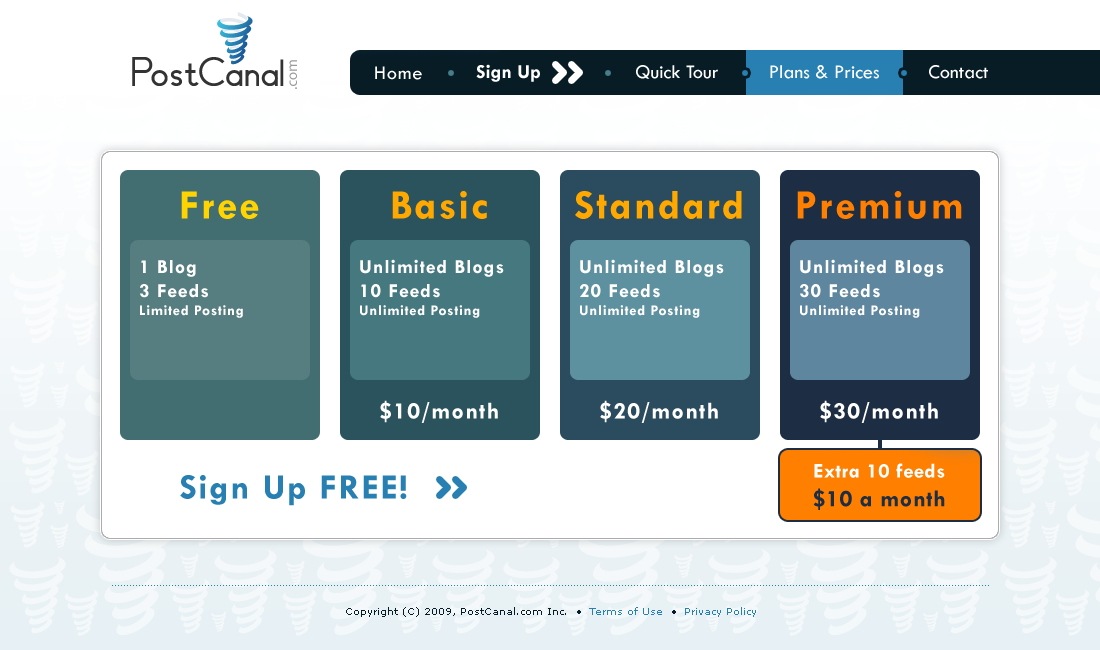
<style>
.page{position:relative;width:1100px;height:650px;background:#ffffff}
.page>*{position:absolute;margin:0}
.t1{font:20px "TwCenMT-Bold";color:#ffffff}
.t2{font:20px "TwCenMT-Regular";color:#ffffff}
.t3{font:20px "TwCenMT-Regular";letter-spacing:0.05em;color:#ffffff}
.t4{font:42px "TwCenMT-Bold";letter-spacing:0.05em;color:#ffd400}
.t5{font:42px "TwCenMT-Bold";letter-spacing:0.05em;color:#ffa800}
.t6{font:42px "TwCenMT-Bold";letter-spacing:0.05em;color:#ff7f00}
.t7{font:15px "TwCenMT-Bold";letter-spacing:0.05em;color:#ffffff}
.t8{font:20px "TwCenMT-Bold";letter-spacing:0.05em;color:#ffffff}
.t9{font:24px "TwCenMT-Bold";letter-spacing:0.05em;color:#ffffff}
.t10{font:21px "TwCenMT-Bold";letter-spacing:0.025em;color:#ffffff}
.t11{font:24px "TwCenMT-Bold";letter-spacing:0.025em;color:#1c2d44}
.t12{font:36px "TwCenMT-Bold";letter-spacing:0.05em;color:#2780b1}
.t13{font:10px "Verdana";color:#081c26}
.t14{font:10px "Verdana";color:#2780b1}
</style>
<div class="page">
<p class="t1" style="left:476px;top:64px;width:64px;height:18px">Sign Up</p>
<p class="t2" style="left:636px;top:65px;width:82px;height:14px">Quick Tour</p>
<p class="t2" style="left:770px;top:65px;width:109px;height:14px">Plans &amp; Prices</p>
<p class="t2" style="left:929px;top:65px;width:59px;height:14px">Contact</p>
<p class="t3" style="left:375px;top:66px;width:47px;height:14px">Home</p>
<p class="t4" style="left:181px;top:191px;width:78px;height:28px">Free</p>
<p class="t5" style="left:392px;top:191px;width:95px;height:28px">Basic</p>
<p class="t5" style="left:575px;top:191px;width:167px;height:28px">Standard</p>
<p class="t6" style="left:797px;top:191px;width:165px;height:28px">Premium</p>
<p class="t7" style="left:140px;top:260px;width:103px;height:58px"><span class="t8">1 Blog<br>3 Feeds<br></span>Limited Posting</p>
<p class="t8" style="left:360px;top:259px;width:144px;height:59px">Unlimited Blogs<br>10 Feeds<br><span class="t7">Unlimited Posting</span></p>
<p class="t8" style="left:580px;top:259px;width:144px;height:59px">Unlimited Blogs<br>20 Feeds<br><span class="t7">Unlimited Posting</span></p>
<p class="t8" style="left:800px;top:259px;width:144px;height:59px">Unlimited Blogs<br>30 Feeds<br><span class="t7">Unlimited Posting</span></p>
<p class="t9" style="left:380px;top:400px;width:118px;height:23px">$10/month</p>
<p class="t9" style="left:600px;top:400px;width:118px;height:23px">$20/month</p>
<p class="t9" style="left:820px;top:400px;width:118px;height:23px">$30/month</p>
<p class="t10" style="left:813px;top:463px;width:132px;height:47px;text-align:center">Extra 10 feeds<br><span class="t11">$10 a month</span></p>
<p class="t12" style="left:180px;top:475px;width:227px;height:31px">Sign Up FREE!</p>
<p class="t13" style="left:346px;top:607px;width:410px;height:10px">Copyright (C) 2009, PostCanal.com Inc.  • <span class="t14"> Terms of Use</span>  •  <span class="t14">Privacy Policy</span></p>
</div>
